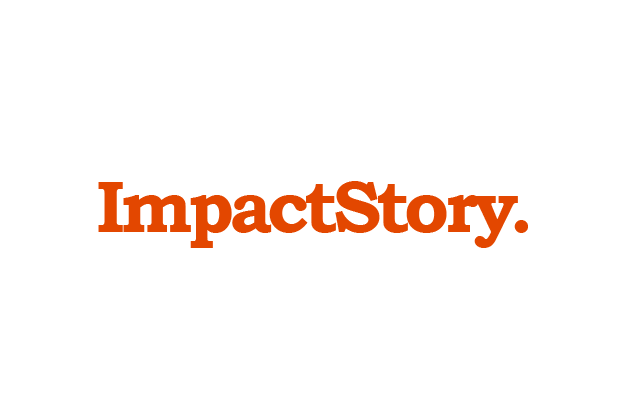
<style>
.page{position:relative;width:624px;height:408px;background:#ffffff}
.page>*{position:absolute;margin:0}
.t1{font:73.1px "BookmanOldStyle-Bold";letter-spacing:-0.07em;color:#e34700}
</style>
<div class="page">
<p class="t1" style="left:98px;top:181px;width:420px;height:67px">ImpactStory</p>
<p class="t1" style="left:514px;top:220px;width:14px;height:13px">.</p>
</div>
